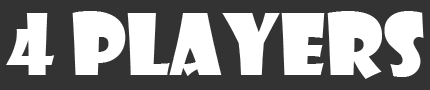
<style>
.page{position:relative;width:430px;height:90px;background:#333333}
.page>*{position:absolute;margin:0}
.t1{font:83.3px "ShowcardGothic-Reg";color:#ffffff}
</style>
<div class="page">
<p class="t1" style="left:6px;top:11px;width:418px;height:68px">4 players</p>
</div>
